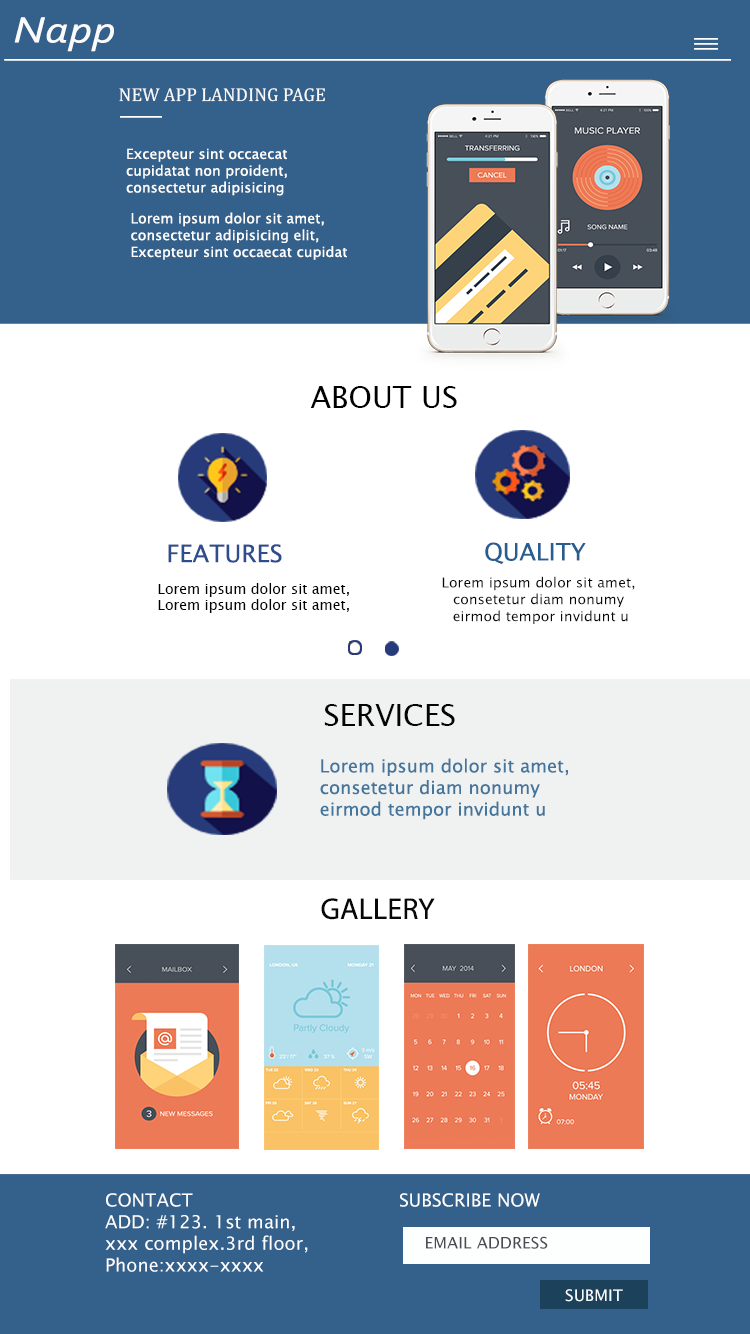
<style>
.page{position:relative;width:750px;height:1334px;background:#ffffff}
.page>*{position:absolute;margin:0}
.t1{font:38.3px "Corbel-Italic";color:#fbfbfb;scale:1.23 1}
.t2{font:18.8px "Cambria";color:#fbfbfb}
.t3{font:14px "LucidaSansUnicode";letter-spacing:0.005em;color:#fefefe}
.t4{font:30px "LucidaSansUnicode";color:#000000}
.t5{font:24px "LucidaSansUnicode";color:#000000}
.t6{font:24px "LucidaSansUnicode";letter-spacing:0.005em;color:#2d4d8f}
.t7{font:24px "LucidaSansUnicode";color:#285d90}
.t8{font:14px "LucidaSansUnicode";letter-spacing:0.005em;color:#080808}
.t9{font:14px "LucidaSansUnicode";color:#000000}
.t10{font:30px "LucidaSansUnicode";color:#040404}
.t11{font:18px "LucidaSansUnicode";letter-spacing:0.005em;color:#44769d}
.t12{font:30px "MyriadPro-Regular";letter-spacing:0.005em;color:#080808}
.t13{font:18px "LucidaSansUnicode";letter-spacing:0.005em;color:#fefeff}
.t14{font:16px "LucidaSansUnicode";letter-spacing:0.005em;color:#4a4c54}
.t15{font:16px "LucidaSansUnicode";letter-spacing:0.005em;color:#f8fbfc}
</style>
<div class="page">
<p class="t1" style="left:14px;top:17px;width:100px;height:35px">Napp</p>
<p class="t2" style="left:119px;top:88px;width:206px;height:14px">NEW APP LANDING PAGE</p>
<p class="t3" style="left:126px;top:148px;width:161px;height:48px">Excepteur sint occaecat <br>cupidatat non proident,<br>consectetur adipisicing</p>
<p class="t3" style="left:131px;top:212px;width:216px;height:48px">Lorem ipsum dolor sit amet,<br>consectetur adipisicing elit,<br>Excepteur sint occaecat cupidat</p>
<p class="t4" style="left:310px;top:386px;width:147px;height:22px"><span class="t5"><br></span>ABOUT US</p>
<p class="t6" style="left:168px;top:544px;width:114px;height:19px">FEATURES</p>
<p class="t7" style="left:485px;top:542px;width:101px;height:22px">QUALITY</p>
<p class="t8" style="left:442px;top:576px;width:193px;height:48px;text-align:center">Lorem ipsum dolor sit amet, <br>consetetur diam nonumy <br>eirmod tempor invidunt u</p>
<p class="t9" style="left:158px;top:583px;width:191px;height:30px">Lorem ipsum dolor sit amet, <br>Lorem ipsum dolor sit amet,</p>
<p class="t10" style="left:324px;top:704px;width:131px;height:22px">SERVICES</p>
<p class="t11" style="left:320px;top:758px;width:248px;height:62px">Lorem ipsum dolor sit amet, <br>consetetur diam nonumy <br>eirmod tempor invidunt u</p>
<p class="t12" style="left:321px;top:898px;width:114px;height:22px">GALLERY</p>
<p class="t13" style="left:105px;top:1193px;width:203px;height:79px">CONTACT<br>ADD: #123. 1st main,<br>xxx complex.3rd floor,<br>Phone:xxxx-xxxx</p>
<p class="t13" style="left:400px;top:1193px;width:140px;height:14px">SUBSCRIBE NOW</p>
<p class="t14" style="left:426px;top:1236px;width:122px;height:13px">EMAIL ADDRESS</p>
<p class="t15" style="left:565px;top:1289px;width:58px;height:13px">SUBMIT</p>
</div>
